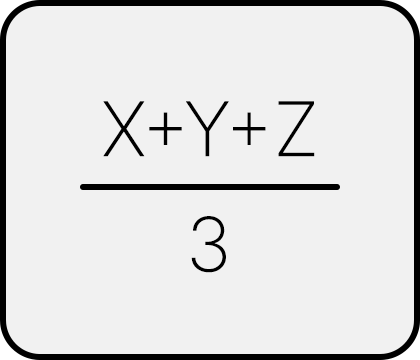
<style>
.page{position:relative;width:420px;height:360px;background:#f1f1f1}
.page>*{position:absolute;margin:0}
.t1{font:75px "Inter-ExtraLight";color:#000000}
</style>
<div class="page">
<p class="t1" style="left:103px;top:101px;width:212px;height:56px">X+Y+Z</p>
<p class="t1" style="left:191px;top:216px;width:35px;height:57px">3</p>
</div>
